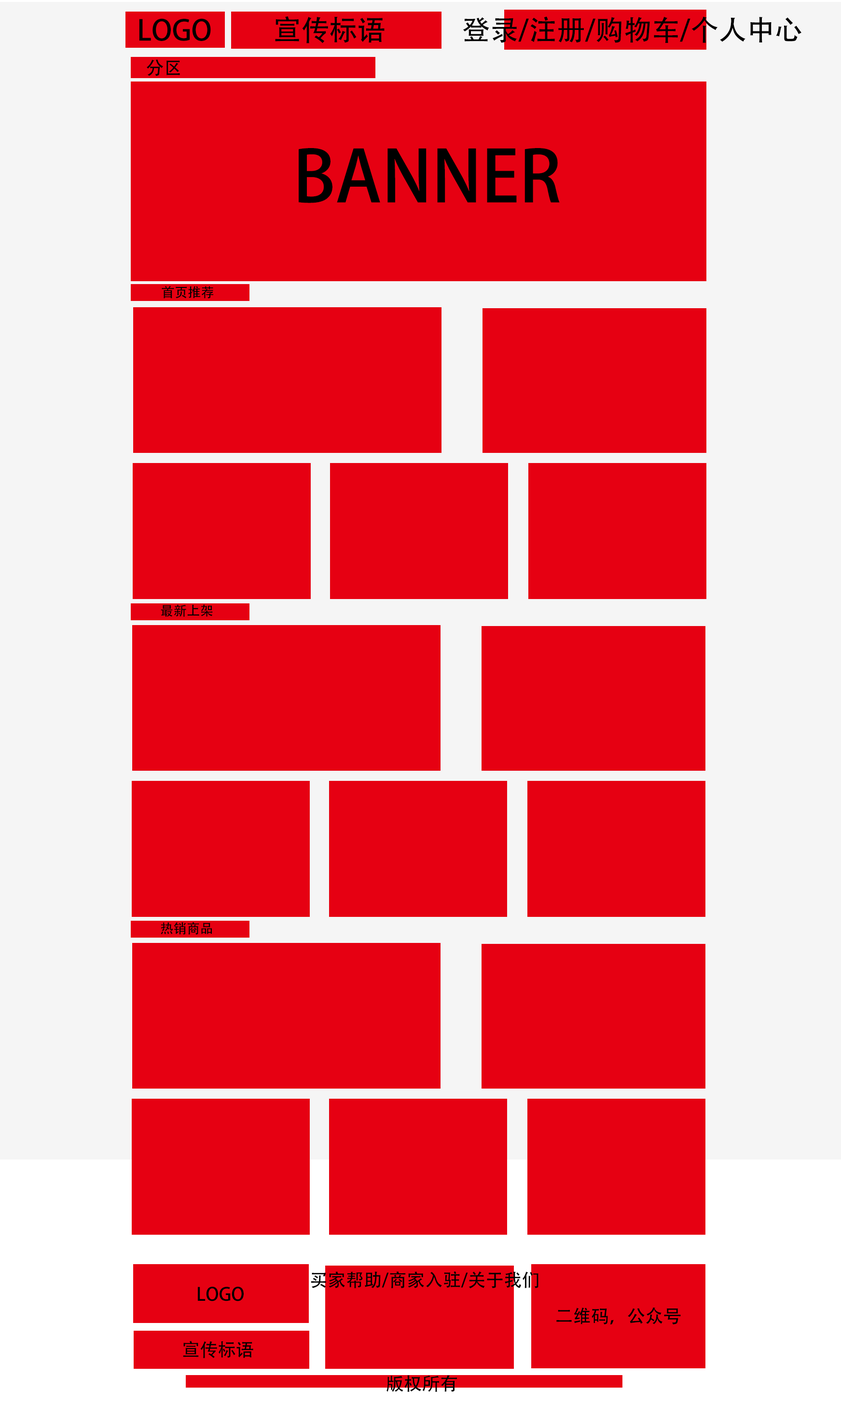
<style>
.page{position:relative;width:841px;height:1418px;background:#e60012}
.page>*{position:absolute;margin:0}
.t1{font:28.1px "AdobeHeitiStd-Regular";color:#000000}
.t2{font:18.1px "AdobeHeitiStd-Regular";color:#000000}
.t3{font:70.3px "AdobeHeitiStd-Regular";color:#000000}
.t4{font:13.2px "AdobeHeitiStd-Regular";color:#000000}
</style>
<div class="page">
<p class="t1" style="left:275px;top:16px;width:109px;height:27px">宣传标语</p>
<p class="t1" style="left:463px;top:16px;width:338px;height:27px">登录/注册/购物车/个人中心</p>
<p class="t1" style="left:139px;top:18px;width:72px;height:23px">LOGO</p>
<p class="t2" style="left:147px;top:59px;width:33px;height:17px">分区</p>
<p class="t3" style="left:299px;top:148px;width:261px;height:55px">BANNER</p>
<p class="t4" style="left:162px;top:286px;width:51px;height:13px">首页推荐</p>
<p class="t4" style="left:161px;top:604px;width:52px;height:13px">最新上架</p>
<p class="t4" style="left:161px;top:922px;width:51px;height:13px">热销商品</p>
<p class="t2" style="left:311px;top:1271px;width:227px;height:18px">买家帮助/商家入驻/关于我们</p>
<p class="t2" style="left:198px;top:1287px;width:46px;height:14px">LOGO</p>
<p class="t2" style="left:556px;top:1307px;width:125px;height:18px">二维码，公众号</p>
<p class="t2" style="left:183px;top:1341px;width:70px;height:17px">宣传标语</p>
<p class="t2" style="left:386px;top:1375px;width:71px;height:17px">版权所有</p>
</div>
